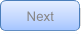
<style>
.page{position:relative;width:81px;height:34px}
.page>*{position:absolute;margin:0}
.t1{font:13.3px "ArialMT";color:#898888}
</style>
<div class="page">
<p class="t1" style="left:27px;top:11px;width:27px;height:10px">Next</p>
</div>
